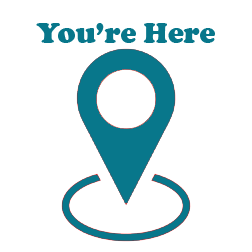
<style>
.page{position:relative;width:252px;height:252px;background:#ffffff}
.page>*{position:absolute;margin:0}
.t1{font:30px "CooperBlack";color:#08778b}
</style>
<div class="page">
<p class="t1" style="left:36px;top:23px;width:179px;height:20px">You’re Here</p>
</div>
